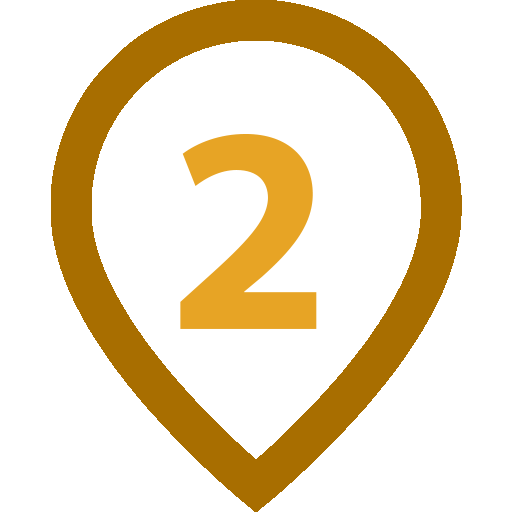
<style>
.page{position:relative;width:512px;height:512px;background:#ffffff}
.page>*{position:absolute;margin:0}
.t1{font:294.9px "MyriadPro-Bold";color:#e7a425}
</style>
<div class="page">
<p class="t1" style="left:180px;top:134px;width:137px;height:195px">2</p>
</div>
